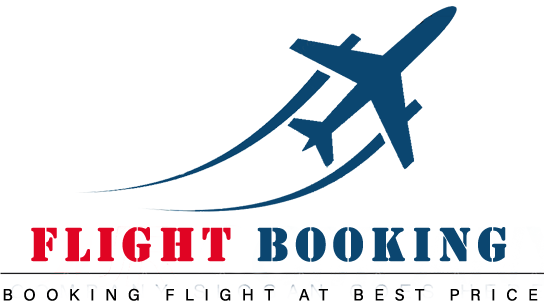
<style>
.page{position:relative;width:544px;height:306px;background:#ffffff}
.page>*{position:absolute;margin:0}
.t1{font:48.8px "Stencil";letter-spacing:0.105em;color:#0b4670;font-weight:bold}
.t2{font:48.8px "Stencil";letter-spacing:0.105em;color:#e00423;font-weight:bold}
.t3{font:16.3px "AcuminConcept-Regular";letter-spacing:0.645em;color:#000000;font-weight:bold}
</style>
<div class="page">
<p class="t1" style="left:31px;top:227px;width:476px;height:35px"><span class="t2">Flight</span> Booking</p>
<p class="t3" style="left:3px;top:288px;width:535px;height:13px">BOOKING FLIGHT AT BEST PRICE</p>
</div>
